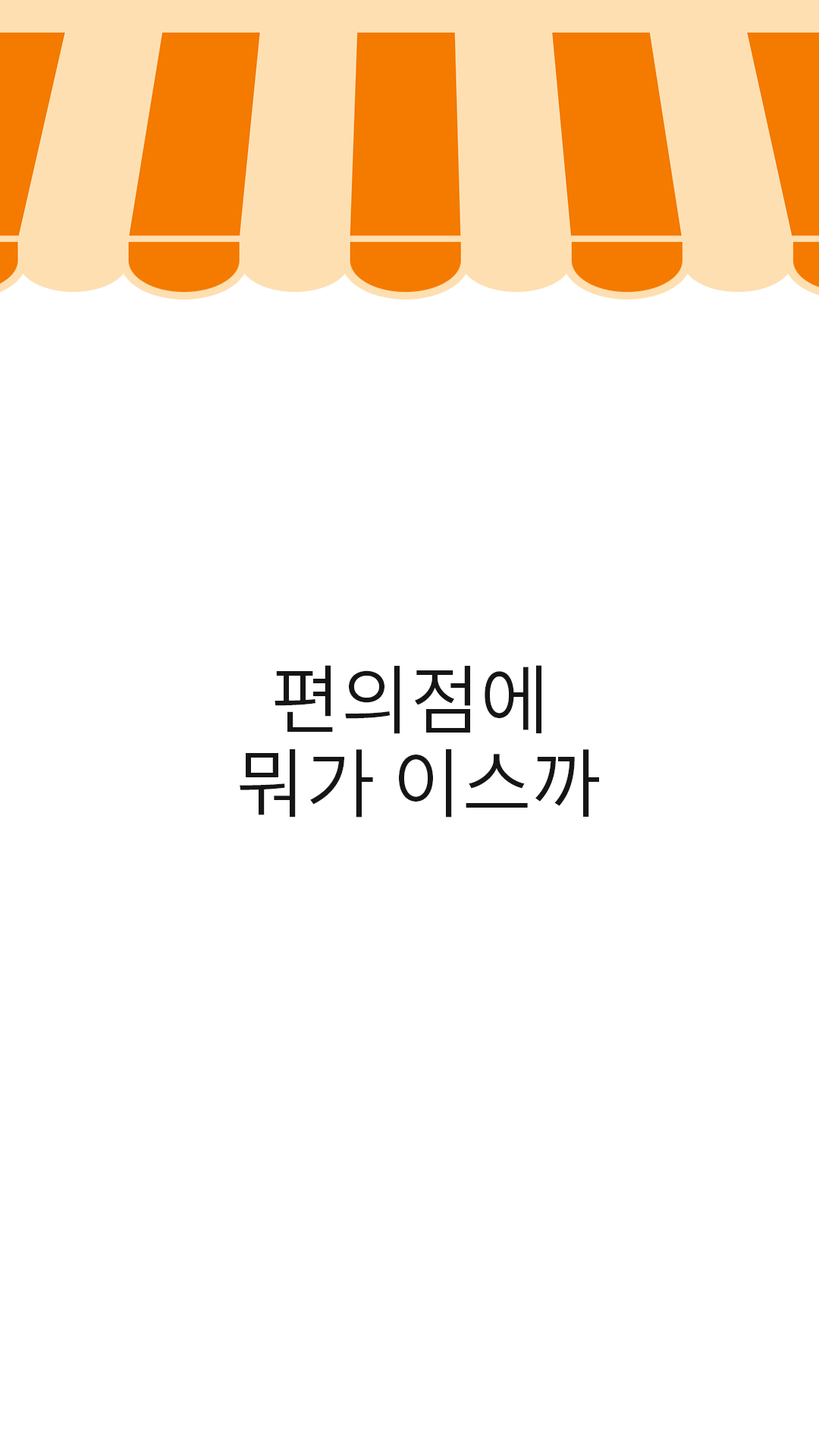
<style>
.page{position:relative;width:819px;height:1456px;background:#ffffff}
.page>*{position:absolute;margin:0}
.t1{font:75.8px/45.5px "NotoSansCJKkr-DemiLight";color:#151515}
</style>
<div class="page">
<p class="t1" style="left:240px;top:665px;width:359px;height:152px;text-align:center">편의점에 <br>뭐가 이스까</p>
</div>
